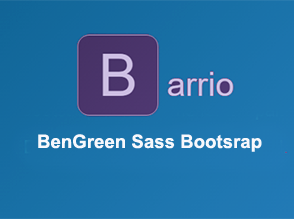
<style>
.page{position:relative;width:294px;height:219px}
.page>*{position:absolute;margin:0}
.t1{font:18.7px "Arial-BoldMT";color:#f8f8fc}
</style>
<div class="page">
<p class="t1" style="left:38px;top:134px;width:224px;height:18px">BenGreen Sass Bootsrap</p>
</div>
